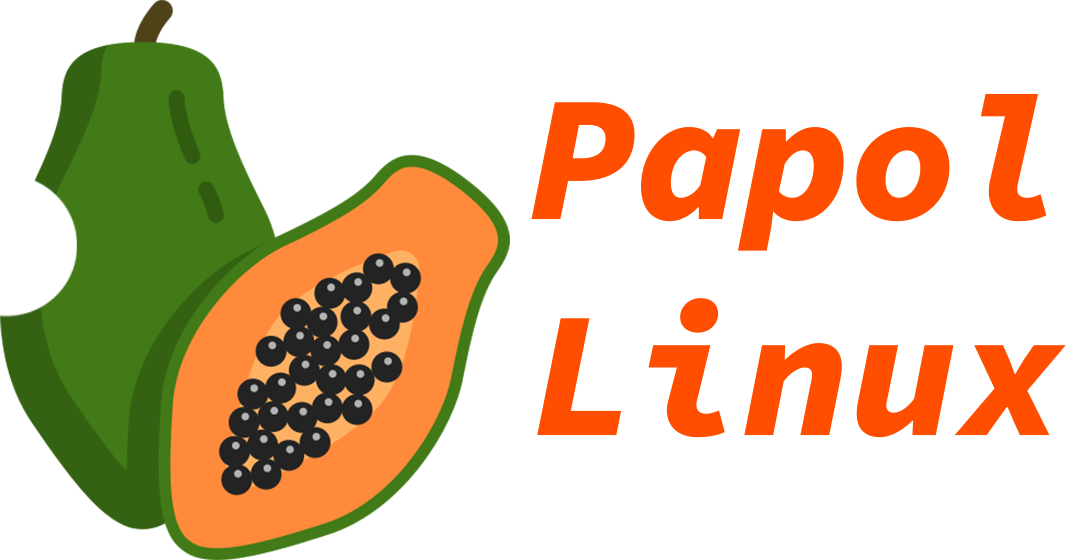
<style>
.page{position:relative;width:1080px;height:560px;background:#ffffff}
.page>*{position:absolute;margin:0}
.t1{font:179.6px "SourceCodePro-Black";color:#ff4e00}
</style>
<div class="page">
<p class="t1" style="left:531px;top:93px;width:535px;height:345px;text-align:center">Papol <br>Linux</p>
</div>
